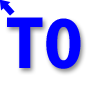
<style>
.page{position:relative;width:90px;height:90px;background:#ffffff}
.page>*{position:absolute;margin:0}
.t1{font:75px "MyriadPro-BoldSemiCn";color:#0000ff}
</style>
<div class="page">
<p class="t1" style="left:7px;top:17px;width:74px;height:52px">T0</p>
</div>
